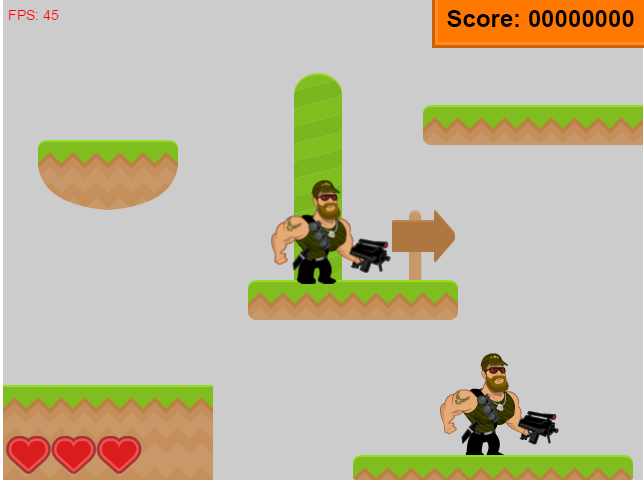
<style>
.page{position:relative;width:644px;height:480px;background:#cccccc}
.page>*{position:absolute;margin:0}
.t1{font:24px "Arial-BoldMT";color:#030303}
</style>
<div class="page">
<p class="t1" style="left:447px;top:10px;width:187px;height:17px">Score: 00000000</p>
</div>
